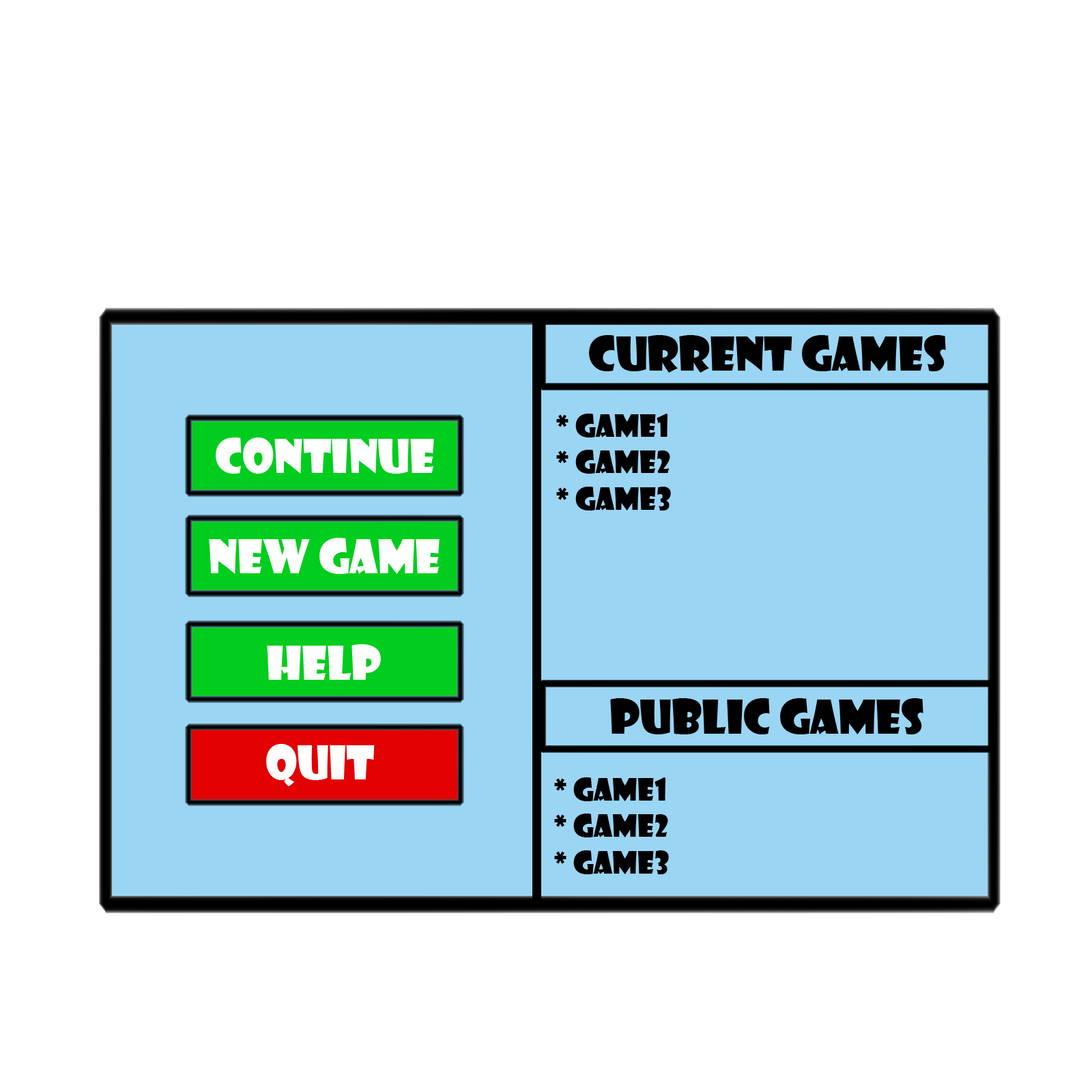
<style>
.page{position:relative;width:1092px;height:1092px;background:#ffffff}
.page>*{position:absolute;margin:0}
.t1{font:45.5px "ShowcardGothic-Reg";color:#000000}
.t2{font:30.3px "ShowcardGothic-Reg";color:#000000}
.t3{font:45.5px "ShowcardGothic-Reg";color:#ffffff}
</style>
<div class="page">
<p class="t1" style="left:589px;top:335px;width:357px;height:38px">Current Games</p>
<p class="t2" style="left:556px;top:414px;width:115px;height:97px">* game1<br>* Game2<br>* Game3</p>
<p class="t3" style="left:216px;top:437px;width:218px;height:37px">Continue</p>
<p class="t3" style="left:209px;top:538px;width:231px;height:36px">New Game</p>
<p class="t3" style="left:267px;top:644px;width:114px;height:36px">Help</p>
<p class="t1" style="left:610px;top:698px;width:313px;height:36px">Public Games</p>
<p class="t3" style="left:266px;top:744px;width:109px;height:42px">Quit</p>
<p class="t2" style="left:554px;top:777px;width:115px;height:97px">* game1<br>* Game2<br>* Game3</p>
</div>
